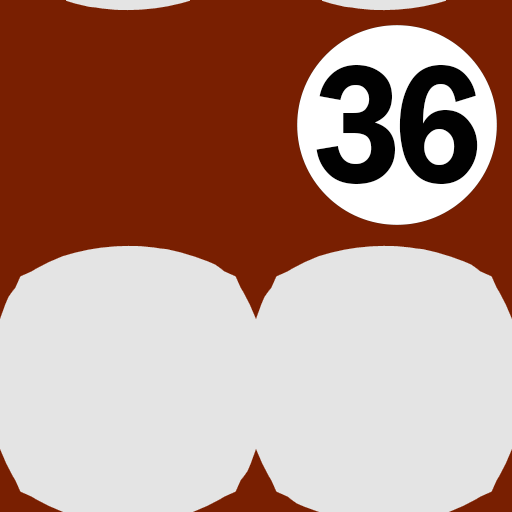
<style>
.page{position:relative;width:512px;height:512px;background:#e4e4e4}
.page>*{position:absolute;margin:0}
.t1{font:172.5px "FranklinGothic-Demi";letter-spacing:-0.05em;color:#010101;scale:0.87 1}
</style>
<div class="page">
<p class="t1" style="left:316px;top:65px;width:162px;height:119px">36</p>
</div>
